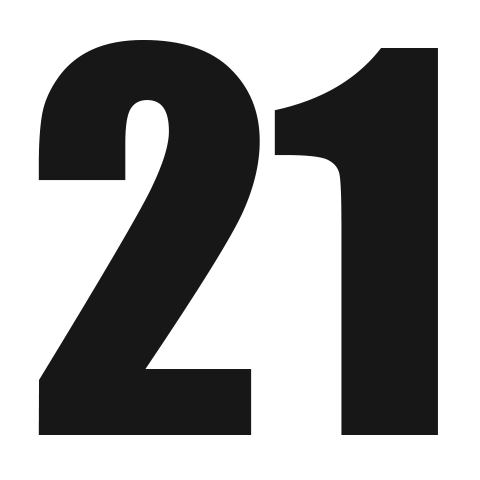
<style>
.page{position:relative;width:480px;height:480px;background:#ffffff}
.page>*{position:absolute;margin:0}
.t1{font:490.3px "Impact";color:#171717}
</style>
<div class="page">
<p class="t1" style="left:38px;top:40px;width:400px;height:395px">21</p>
</div>
